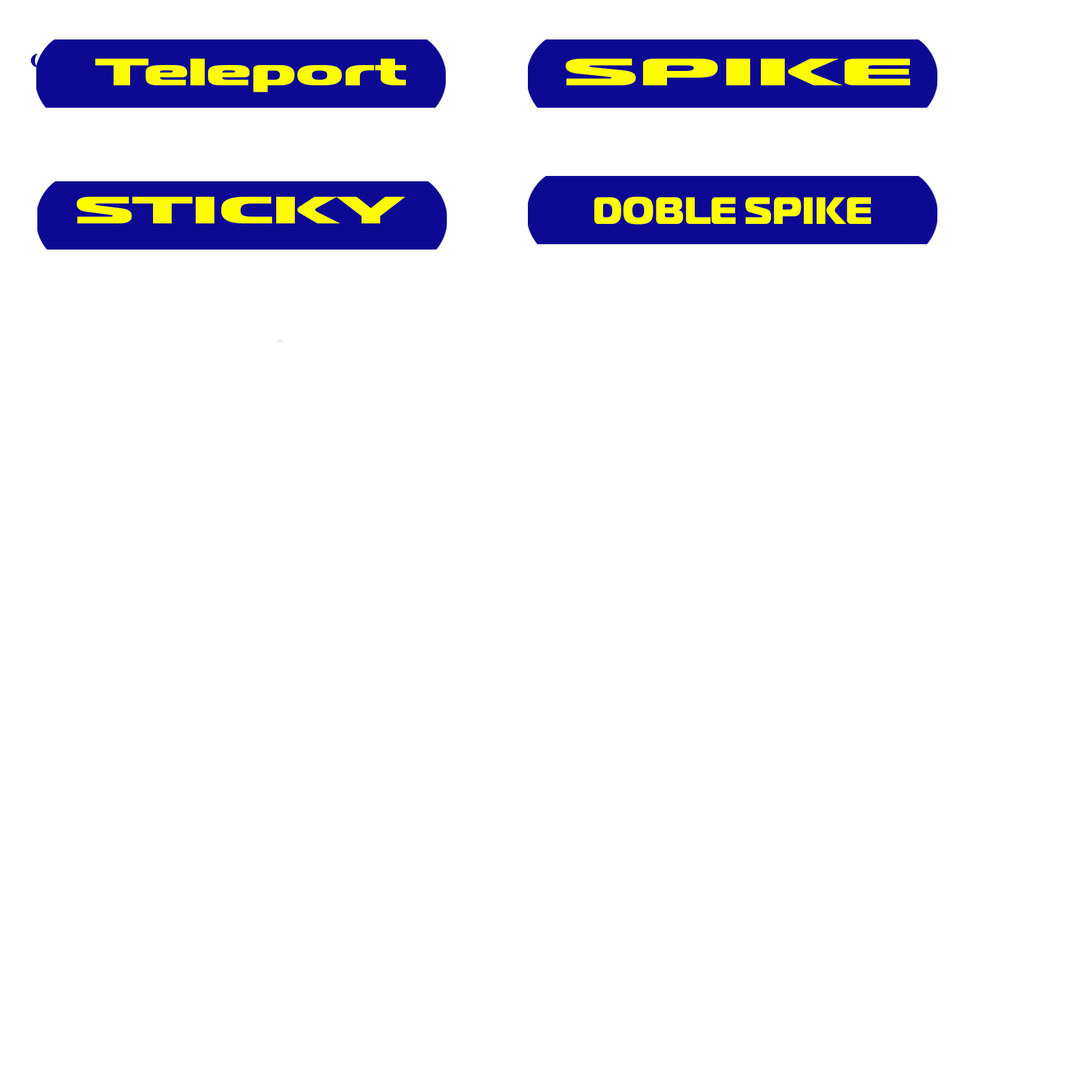
<style>
.page{position:relative;width:1092px;height:1092px;background:#ffffff}
.page>*{position:absolute;margin:0}
.t1{font:38.4px "MagistralBlackC";color:#fffc01;scale:1.9 1}
.t2{font:38.4px "MagistralBlackC";color:#fffc01;scale:2.75 1}
.t3{font:38.4px "MagistralBlackC";color:#fffc01;scale:2.15 1}
.t4{font:38.4px "MagistralBlackC";color:#fffc01}
</style>
<div class="page">
<p class="t1" style="left:95px;top:59px;width:311px;height:33px">Teleport</p>
<p class="t2" style="left:566px;top:59px;width:344px;height:26px">SPIKE</p>
<p class="t3" style="left:77px;top:197px;width:328px;height:26px">STICKY</p>
<p class="t4" style="left:594px;top:197px;width:277px;height:27px">DOBLE SPIKE</p>
</div>
